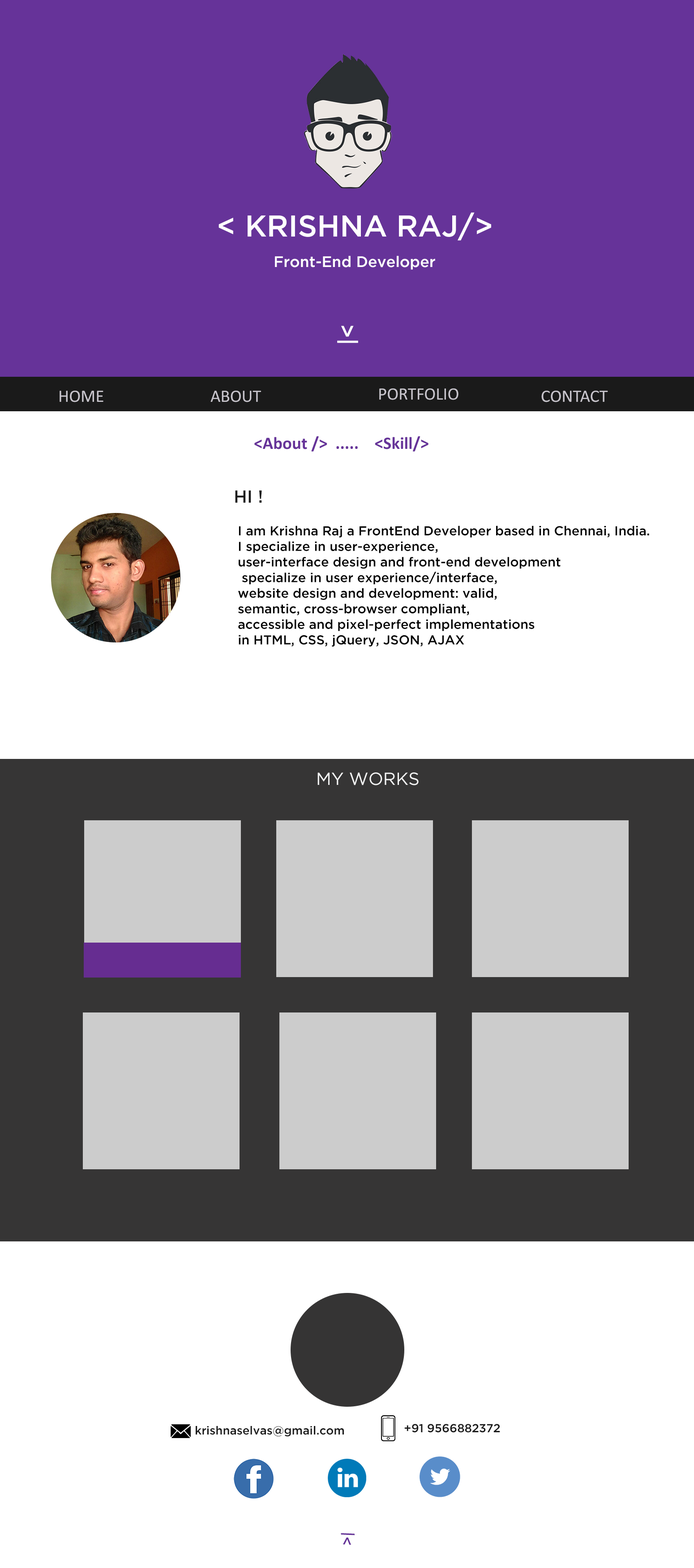
<style>
.page{position:relative;width:694px;height:1568px;background:#ffffff}
.page>*{position:absolute;margin:0}
.t1{font:30px "GothamMedium";color:#ffffff}
.t2{font:15.2px "GothamMedium";color:#ffffff}
.t3{font:22.4px "GothamMedium";color:#ffffff}
.t4{font:17.5px "Calibri";color:#c8c5cc}
.t5{font:17.5px "Calibri-Bold";color:#663399}
.t6{font:17.5px "GothamMedium";color:#1a1a1a}
.t7{font:13px "GothamMedium";color:#000000}
.t8{font:17.5px "GothamBook";color:#f5f5f5}
.t9{font:11.6px "GothamMedium";color:#1a1a1a}
.t10{font:14.8px "GothamMedium";color:#663399}
</style>
<div class="page">
<p class="t1" style="left:219px;top:212px;width:272px;height:29px">&lt; KRISHNA RAJ/&gt;</p>
<p class="t2" style="left:275px;top:256px;width:160px;height:14px">Front-End Developer</p>
<p class="t3" style="left:337px;top:326px;width:21px;height:17px;rotate:-90deg">|&lt;</p>
<p class="t4" style="left:379px;top:388px;width:80px;height:12px">PORTFOLIO</p>
<p class="t4" style="left:60px;top:391px;width:43px;height:11px">HOME</p>
<p class="t4" style="left:211px;top:391px;width:50px;height:11px">ABOUT</p>
<p class="t4" style="left:542px;top:391px;width:66px;height:11px">CONTACT</p>
<p class="t5" style="left:254px;top:436px;width:175px;height:16px">&lt;About /&gt;  .....    &lt;Skill/&gt;</p>
<p class="t6" style="left:235px;top:490px;width:27px;height:13px">HI !</p>
<p class="t7" style="left:238px;top:526px;width:412px;height:121px">I am Krishna Raj a FrontEnd Developer based in Chennai, India. <br>I specialize in user-experience, <br>user-interface design and front-end development<br> specialize in user experience/interface, <br>website design and development: valid, <br>semantic, cross-browser compliant, <br>accessible and pixel-perfect implementations <br>in HTML, CSS, jQuery, JSON, AJAX</p>
<p class="t8" style="left:318px;top:772px;width:101px;height:13px">MY WORKS</p>
<p class="t9" style="left:196px;top:1426px;width:148px;height:11px">krishnaselvas@gmail.com</p>
<p class="t9" style="left:405px;top:1424px;width:95px;height:9px">+91 9566882372</p>
<p class="t10" style="left:341px;top:1533px;width:14px;height:12px;rotate:-87deg">&gt;|</p>
</div>
